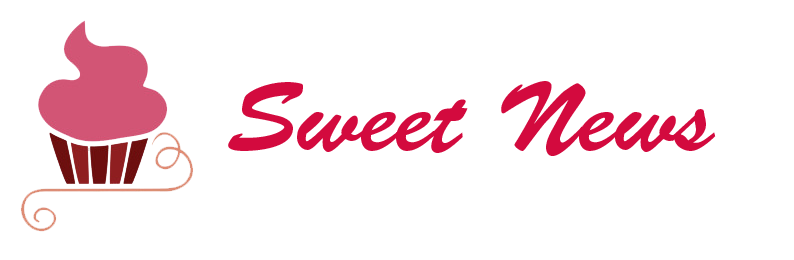
<style>
.page{position:relative;width:794px;height:260px;background:#ffffff}
.page>*{position:absolute;margin:0}
.t1{font:100px "BrushScriptStd";color:#d30a3e}
</style>
<div class="page">
<p class="t1" style="left:228px;top:81px;width:488px;height:75px">Sweet News</p>
</div>
